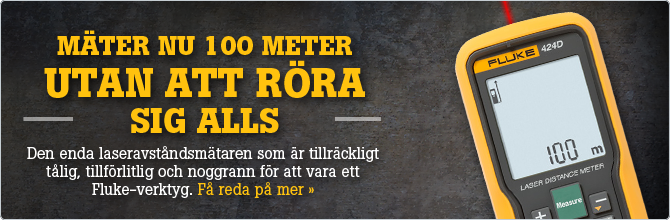
<style>
.page{position:relative;width:670px;height:220px}
.page>*{position:absolute;margin:0}
.t1{font:26.8px/44.8px "BotonPro-Bold";color:#ffc20e;text-transform:uppercase}
.t2{font:40px/42px "BotonPro-Bold";color:#ffc20e;text-transform:uppercase}
.t3{font:35px/36px "BotonPro-Bold";color:#ffc20e;text-transform:uppercase}
.t4{font:16px/18px "BotonPro-Regular";color:#ffffff}
.t5{font:16px/18px "BotonPro-Regular";color:#ffc20e}
</style>
<div class="page">
<p class="t1" style="left:44px;top:30px;width:321px;height:103px;text-align:center">Mäter nu 100 meter <br><span class="t2">utan att röra <br></span><span class="t3">sig alls</span></p>
<p class="t4" style="left:27px;top:146px;width:352px;height:52px;text-align:center">Den enda laseravståndsmätaren som är tillräckligt tålig, tillförlitlig och noggrann för att vara ett <br>Fluke-verktyg. <span class="t5">Få reda på mer »</span></p>
</div>
